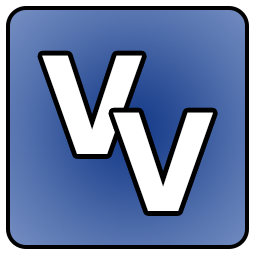
<style>
.page{position:relative;width:256px;height:256px;background:#ffffff}
.page>*{position:absolute;margin:0}
.t1{font:140px "Poppins-Bold";color:#ffffff}
</style>
<div class="page">
<p class="t1" style="left:42px;top:55px;width:100px;height:99px">V</p>
<p class="t1" style="left:113px;top:112px;width:100px;height:99px">V</p>
</div>
